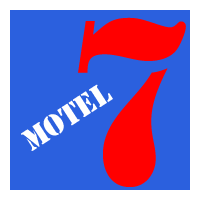
<style>
.page{position:relative;width:200px;height:200px;background:#2b60de}
.page>*{position:absolute;margin:0}
.t1{font:220px "StencilStd";color:#ff0000}
.t2{font:28px "StencilStd";color:#ffffff}
</style>
<div class="page">
<p class="t1" style="left:78px;top:17px;width:108px;height:170px">7</p>
<p class="t2" style="left:21px;top:84px;width:92px;height:67px;rotate:-33deg">MOTEL</p>
</div>
